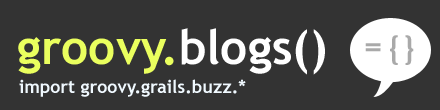
<style>
.page{position:relative;width:440px;height:110px;background:#333333}
.page>*{position:absolute;margin:0}
.t1{font:47.8px "TrebuchetMS-Bold";color:#eaff5e}
.t2{font:47.8px "TrebuchetMS-Bold";color:#ffffff}
.t3{font:35.9px "FranklinGothic-MediumCond";color:#a9a9a9}
.t4{font:17.9px "TrebuchetMS-Bold";color:#f0f9ff}
</style>
<div class="page">
<p class="t1" style="left:18px;top:28px;width:307px;height:47px">groovy.<span class="t2">blogs()</span></p>
<p class="t3" style="left:365px;top:35px;width:49px;height:30px">= { }</p>
<p class="t4" style="left:19px;top:79px;width:227px;height:18px">import groovy.grails.buzz.*</p>
</div>
